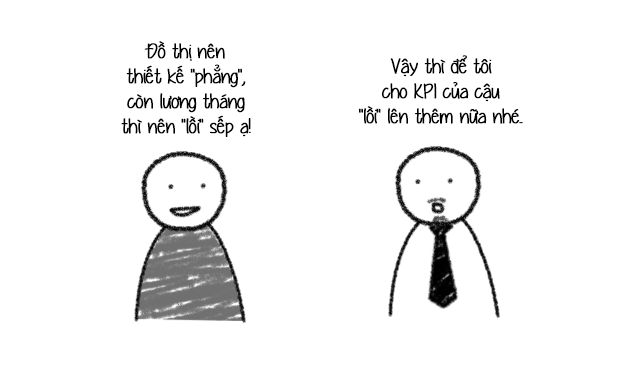
<style>
.page{position:relative;width:617px;height:375px;background:#ffffff}
.page>*{position:absolute;margin:0}
.t1{font:20.8px "UVFYummyCupcakes";letter-spacing:-0.02em;color:#000000;font-weight:bold}
</style>
<div class="page">
<p class="t1" style="left:121px;top:41px;width:130px;height:96px;text-align:center">Đồ thị nên<br>thiết kế "phẳng",<br>còn lương tháng<br>thì nên "lồi" sếp ạ!</p>
<p class="t1" style="left:359px;top:55px;width:164px;height:69px;text-align:center">Vậy thì để tôi<br>cho KPI của cậu<br>"lồi" lên thêm nữa nhé..</p>
</div>
